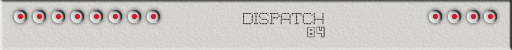
<style>
.page{position:relative;width:512px;height:50px}
.page>*{position:absolute;margin:0}
.t1{font:14.2px "8PinMatrix"}
.t2{font:18.9px "Bio-disc"}
</style>
<div class="page">
<p class="t1" style="left:243px;top:13px;width:81px;height:12px">DISPATCH</p>
<p class="t2" style="left:307px;top:26px;width:18px;height:12px">84</p>
</div>
